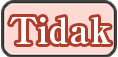
<style>
.page{position:relative;width:118px;height:57px;background:#ffdad5}
.page>*{position:absolute;margin:0}
.t1{font:36.5px "RyuminPro-ExBold";color:#ffffff}
</style>
<div class="page">
<p class="t1" style="left:10px;top:17px;width:101px;height:27px">Tidak</p>
</div>
